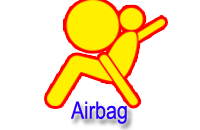
<style>
.page{position:relative;width:200px;height:130px;background:#ffffff}
.page>*{position:absolute;margin:0}
.t1{font:24px "ArialNarrow";color:#2501fe}
</style>
<div class="page">
<p class="t1" style="left:71px;top:101px;width:56px;height:23px">Airbag</p>
</div>
